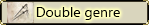
<style>
.page{position:relative;width:149px;height:25px;background:#d9d5bd}
.page>*{position:absolute;margin:0}
.t1{font:14px "LaoUI";color:#000000}
</style>
<div class="page">
<p class="t1" style="left:36px;top:7px;width:84px;height:13px">Double genre</p>
</div>
